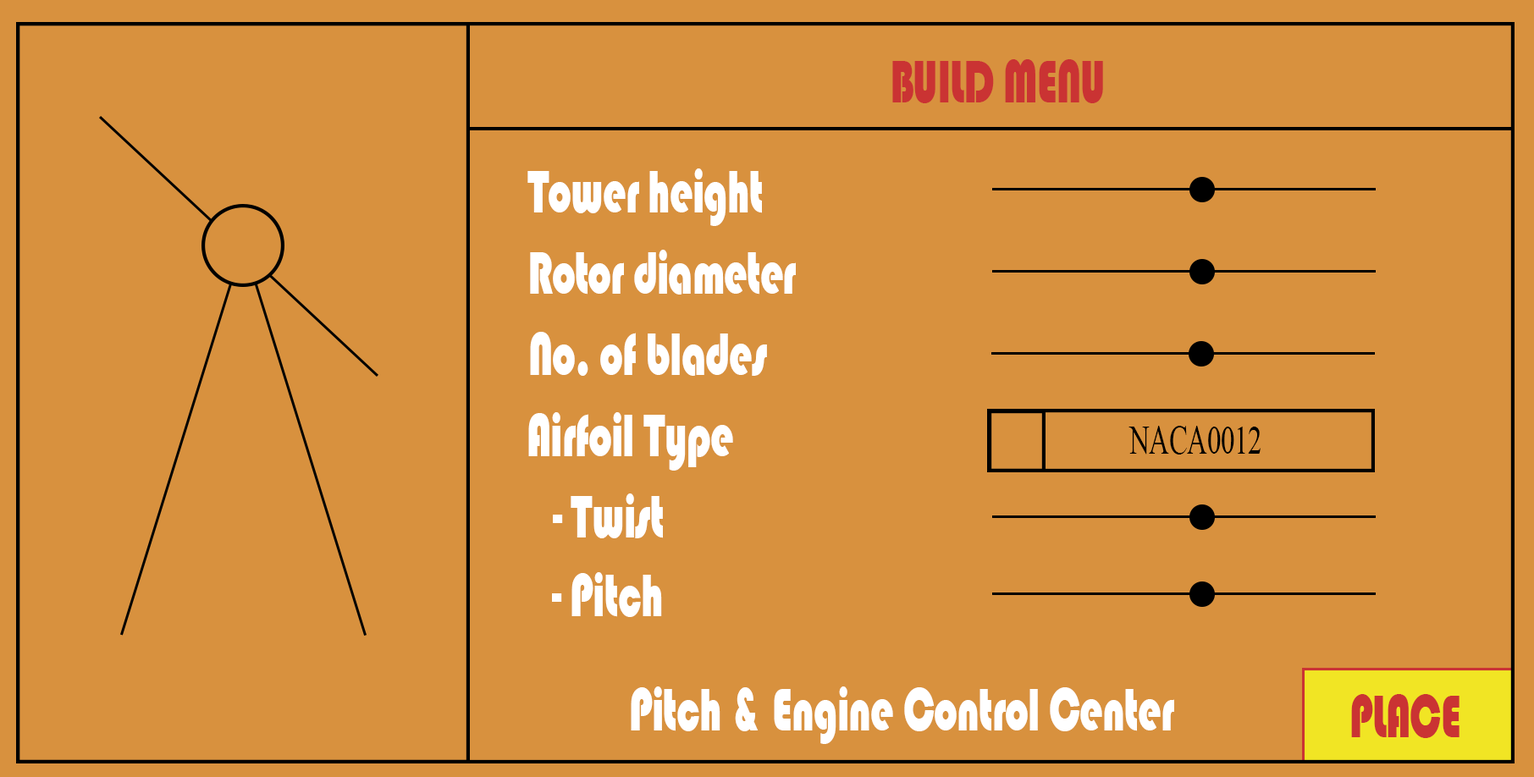
<style>
.page{position:relative;width:1534px;height:777px;background:#d8913e}
.page>*{position:absolute;margin:0}
.t1{font:62.7px "Bauhaus93";letter-spacing:-0.02em;color:#ca3333;scale:0.68 1}
.t2{font:62.7px "Bauhaus93";letter-spacing:-0.02em;color:#ffffff;scale:0.68 1}
.t3{font:41.8px "TimesNewRomanPSMT";letter-spacing:-0.02em;color:#000000;scale:0.68 1}
</style>
<div class="page">
<p class="t1" style="left:892px;top:59px;width:211px;height:44px">BUILD MENU</p>
<p class="t2" style="left:527px;top:168px;width:235px;height:58px">Tower height</p>
<p class="t2" style="left:530px;top:250px;width:266px;height:45px">Rotor diameter</p>
<p class="t2" style="left:530px;top:332px;width:237px;height:44px">No. of blades</p>
<p class="t2" style="left:528px;top:412px;width:205px;height:59px">Airfoil Type</p>
<p class="t3" style="left:1129px;top:426px;width:132px;height:29px">NACA0012</p>
<p class="t2" style="left:553px;top:494px;width:110px;height:44px">- Twist</p>
<p class="t2" style="left:552px;top:572px;width:110px;height:45px">- Pitch</p>
<p class="t2" style="left:631px;top:687px;width:543px;height:57px">Pitch &amp; Engine Control Center</p>
<p class="t1" style="left:1351px;top:694px;width:109px;height:44px">PLACE</p>
</div>
